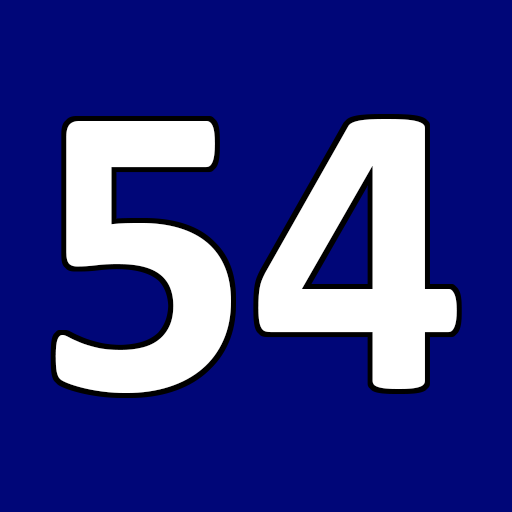
<style>
.page{position:relative;width:512px;height:512px;background:#000678}
.page>*{position:absolute;margin:0}
.t1{font:423.3px "Calibri-Bold";color:#ffffff}
</style>
<div class="page">
<p class="t1" style="left:55px;top:119px;width:402px;height:274px">54</p>
</div>
